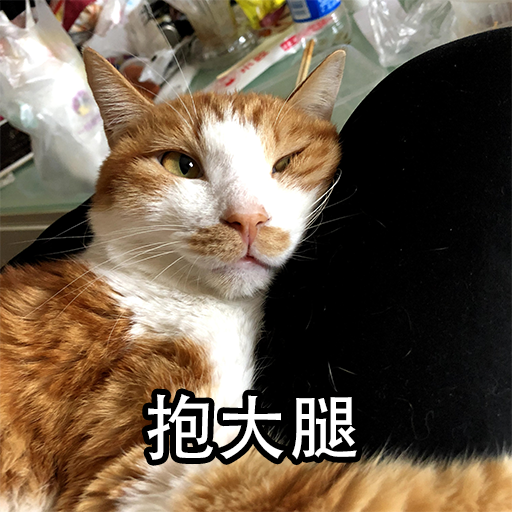
<style>
.page{position:relative;width:512px;height:512px}
.page>*{position:absolute;margin:0}
.t1{font:72px "AdobeHeitiStd-Regular";color:#ffffff}
</style>
<div class="page">
<p class="t1" style="left:147px;top:394px;width:210px;height:66px">抱大腿</p>
</div>
